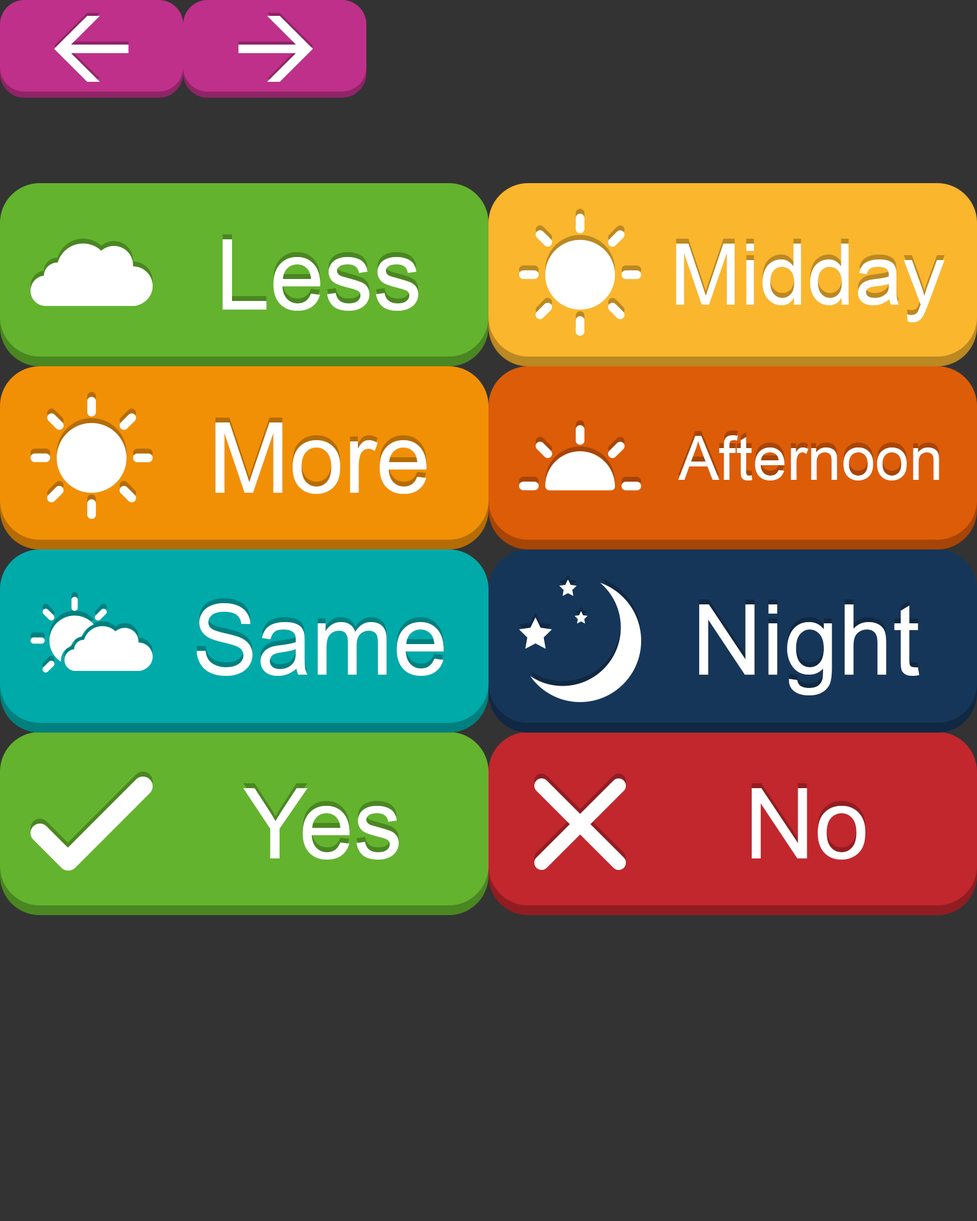
<style>
.page{position:relative;width:977px;height:1221px;background:#333333}
.page>*{position:absolute;margin:0}
.t1{font:97.7px "ArialMT";color:#ffffff}
.t2{font:85.5px "ArialMT";color:#ffffff}
.t3{font:61px "ArialMT";color:#ffffff}
</style>
<div class="page">
<p class="t1" style="left:222px;top:239px;width:196px;height:72px">Less</p>
<p class="t2" style="left:676px;top:244px;width:268px;height:78px">Midday</p>
<p class="t1" style="left:215px;top:422px;width:212px;height:72px">More</p>
<p class="t3" style="left:678px;top:435px;width:261px;height:45px">Afternoon</p>
<p class="t1" style="left:197px;top:603px;width:247px;height:73px">Same</p>
<p class="t1" style="left:699px;top:604px;width:220px;height:91px">Night</p>
<p class="t1" style="left:243px;top:788px;width:156px;height:71px">Yes</p>
<p class="t1" style="left:751px;top:788px;width:115px;height:71px">No</p>
</div>
